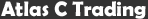
<style>
.page{position:relative;width:148px;height:19px;background:#333333}
.page>*{position:absolute;margin:0}
.t1{font:21px "BerlinSansFBDemi-Bold";color:#ffffff}
</style>
<div class="page">
<p class="t1" style="left:1px;top:1px;width:145px;height:18px">Atlas C Trading</p>
</div>
